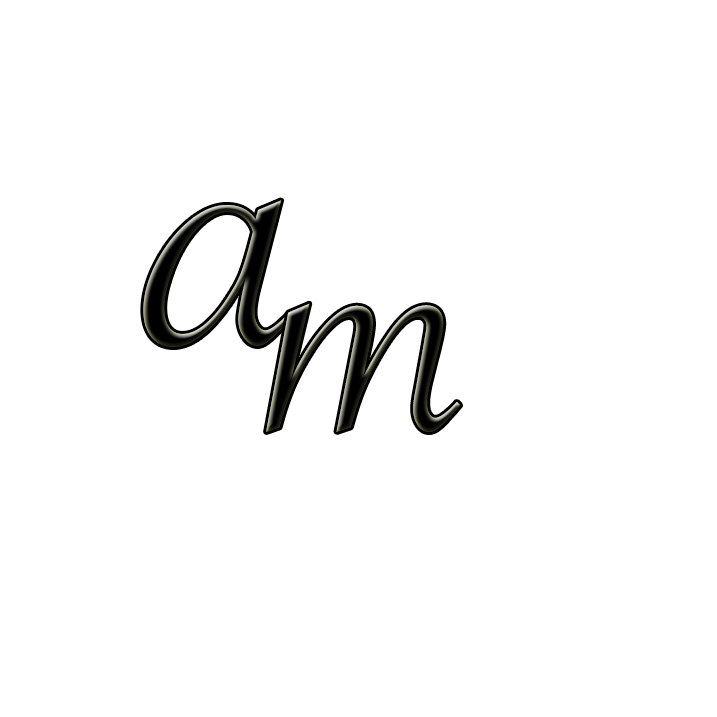
<style>
.page{position:relative;width:717px;height:717px;background:#ffffff}
.page>*{position:absolute;margin:0}
.t1{font:500px "SavoyeLetPlain"}
.t2{font:440px "SavoyeLetPlain"}
</style>
<div class="page">
<p class="t1" style="left:143px;top:200px;width:150px;height:147px">a</p>
<p class="t2" style="left:266px;top:303px;width:195px;height:129px">m</p>
</div>
